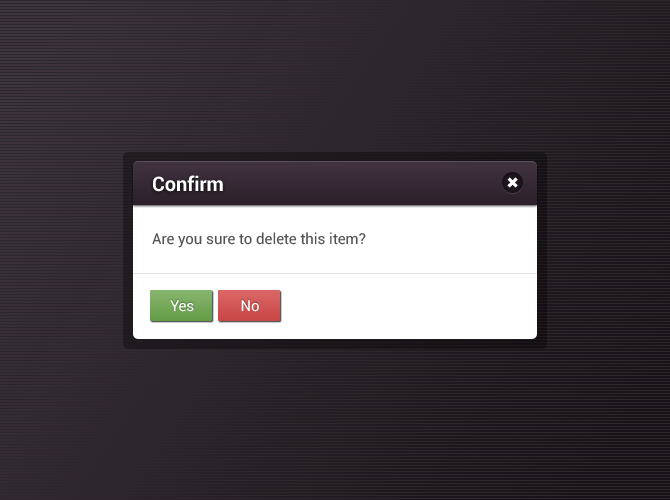
<style>
.page{position:relative;width:670px;height:500px;background:#2a292a}
.page>*{position:absolute;margin:0}
.t1{font:20px "Roboto-Bold";color:#ffffff}
.t2{font:15px "Roboto-Regular";color:#535353}
.t3{font:15px "Roboto-Regular";color:#ffffff}
</style>
<div class="page">
<p class="t1" style="left:153px;top:175px;width:70px;height:17px">Confirm</p>
<p class="t2" style="left:152px;top:232px;width:214px;height:16px">Are you sure to delete this item?</p>
<p class="t3" style="left:170px;top:300px;width:24px;height:12px">Yes</p>
<p class="t3" style="left:241px;top:300px;width:18px;height:12px">No</p>
</div>
